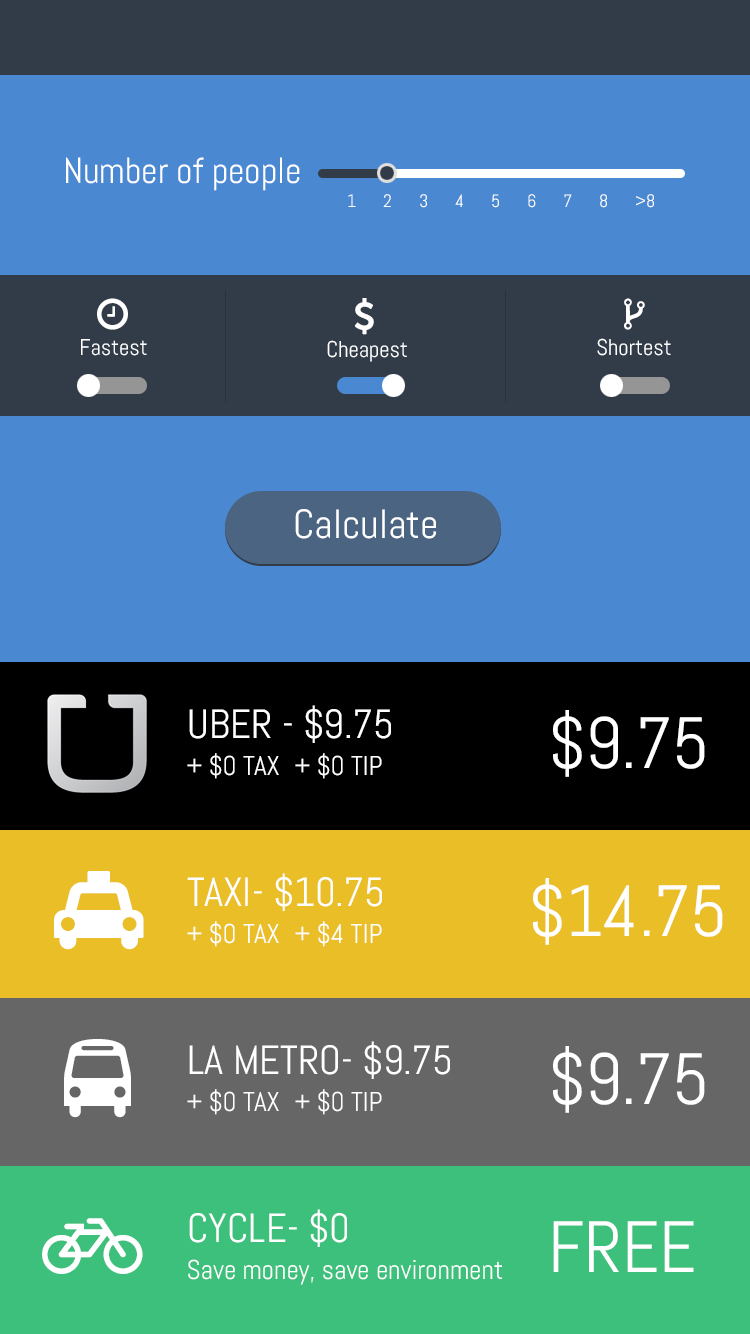
<style>
.page{position:relative;width:750px;height:1334px;background:#4a89d1}
.page>*{position:absolute;margin:0}
.t1{font:36.2px "Abel-Regular";color:#ffffff}
.t2{font:18.1px "Abel-Regular";color:#ffffff}
.t3{font:22.6px "Abel-Regular";color:#ffffff}
.t4{font:40.8px "Abel-Regular";color:#ffffff}
.t5{font:72.4px "Abel-Regular";color:#ffffff}
.t6{font:27.2px "Abel-Regular";color:#ffffff}
</style>
<div class="page">
<p class="t1" style="left:66px;top:157px;width:234px;height:34px">Number of people</p>
<p class="t2" style="left:348px;top:194px;width:306px;height:14px">1 2 3 4 5 6 7 8 &gt;8</p>
<p class="t3" style="left:81px;top:339px;width:66px;height:17px">Fastest</p>
<p class="t3" style="left:327px;top:340px;width:80px;height:22px">Cheapest</p>
<p class="t3" style="left:597px;top:338px;width:74px;height:18px">Shortest</p>
<p class="t4" style="left:295px;top:509px;width:141px;height:30px">Calculate</p>
<p class="t4" style="left:189px;top:705px;width:202px;height:38px">UBER - $9.75</p>
<p class="t5" style="left:553px;top:710px;width:152px;height:67px">$9.75</p>
<p class="t6" style="left:187px;top:753px;width:195px;height:26px">+ $0 TAX + $0 TIP</p>
<p class="t4" style="left:187px;top:873px;width:195px;height:38px">TAXI- $10.75</p>
<p class="t5" style="left:533px;top:878px;width:190px;height:67px">$14.75</p>
<p class="t6" style="left:187px;top:921px;width:195px;height:26px">+ $0 TAX + $4 TIP</p>
<p class="t4" style="left:189px;top:1041px;width:261px;height:38px">LA METRO- $9.75</p>
<p class="t5" style="left:553px;top:1046px;width:152px;height:67px">$9.75</p>
<p class="t6" style="left:187px;top:1089px;width:195px;height:26px">+ $0 TAX + $0 TIP</p>
<p class="t4" style="left:189px;top:1209px;width:158px;height:38px">CYCLE- $0</p>
<p class="t5" style="left:553px;top:1221px;width:141px;height:51px">FREE</p>
<p class="t6" style="left:188px;top:1259px;width:314px;height:26px">Save money, save environment</p>
</div>
